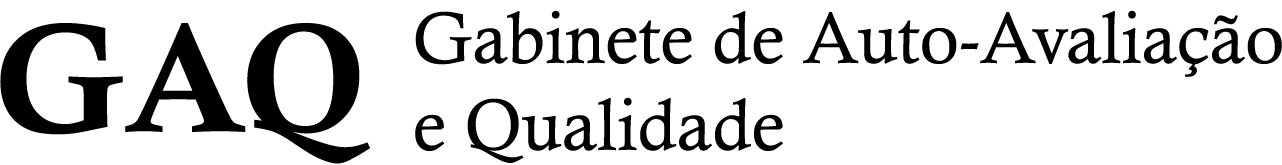
<style>
.page{position:relative;width:1282px;height:165px;background:#ffffff}
.page>*{position:absolute;margin:0}
.t1{font:72.5px "CalistoMT";color:#000000}
.t2{font:153.9px "CalisMTBol";color:#000000}
</style>
<div class="page">
<p class="t1" style="left:415px;top:10px;width:867px;height:153px">Gabinete de Auto-Avaliação <br>e Qualidade</p>
<p class="t2" style="left:0px;top:23px;width:370px;height:141px">GAQ</p>
</div>
